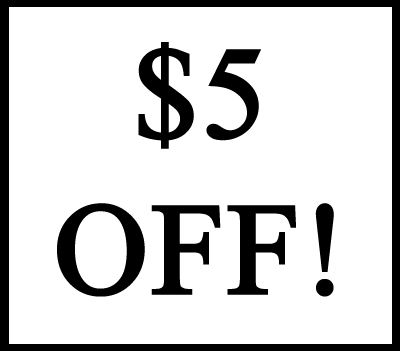
<style>
.page{position:relative;width:400px;height:351px;background:#ffffff}
.page>*{position:absolute;margin:0}
.t1{font:130px "TimesNewRomanPSMT";color:#000000;font-weight:bold}
</style>
<div class="page">
<p class="t1" style="left:57px;top:42px;width:277px;height:255px;text-align:center">$5<br>OFF!</p>
</div>
